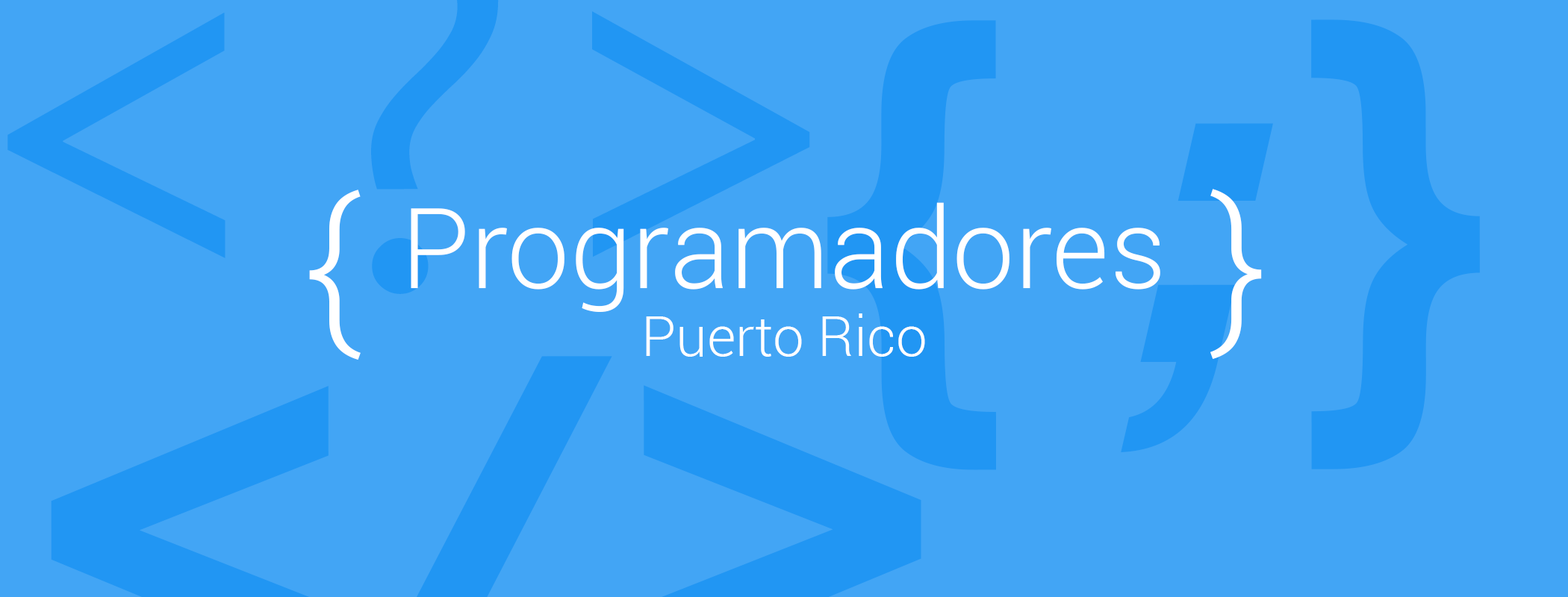
<style>
.page{position:relative;width:1568px;height:597px;background:#42a5f5}
.page>*{position:absolute;margin:0}
.t1{font:504px "Rockwell-BoldItalic";color:#2196f3}
.t2{font:174.2px "Roboto-Light";color:#ffffff}
.t3{font:112px "Roboto-Light";color:#ffffff}
.t4{font:56px "Roboto-Light";color:#ffffff}
</style>
<div class="page">
<p class="t1" style="left:827px;top:19px;width:653px;height:451px">{ ;}</p>
<p class="t2" style="left:309px;top:190px;width:52px;height:170px">{</p>
<p class="t2" style="left:1210px;top:189px;width:52px;height:170px">}</p>
<p class="t3" style="left:411px;top:202px;width:749px;height:110px">Programadores</p>
<p class="t4" style="left:646px;top:314px;width:279px;height:43px">Puerto Rico</p>
</div>
